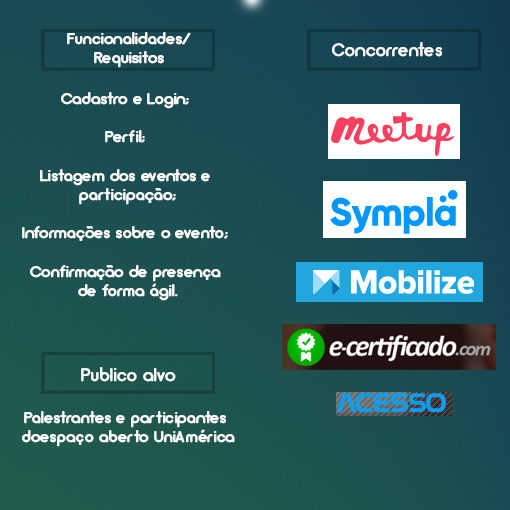
<style>
.page{position:relative;width:510px;height:510px}
.page>*{position:absolute;margin:0}
.t1{font:16px "Arciform";color:#f9fafa;font-weight:bold}
.t2{font:18px "Arciform";color:#f9fafa;font-weight:bold}
</style>
<div class="page">
<p class="t1" style="left:67px;top:32px;width:124px;height:36px;text-align:center">Funcionalidades/<br>Requisitos</p>
<p class="t2" style="left:332px;top:42px;width:110px;height:15px">Concorrentes</p>
<p class="t1" style="left:22px;top:92px;width:206px;height:209px;text-align:center">Cadastro e Login;<br><br>Perfil;<br><br>Listagem dos eventos e<br> participação;<br><br>Informações sobre o evento;<br><br>Confirmação de presença<br> de forma ágil.</p>
<p class="t2" style="left:81px;top:367px;width:95px;height:15px">Publico alvo</p>
<p class="t1" style="left:22px;top:411px;width:213px;height:36px;text-align:center">Palestrantes e participantes <br>doespaço aberto UniAmérica</p>
</div>
